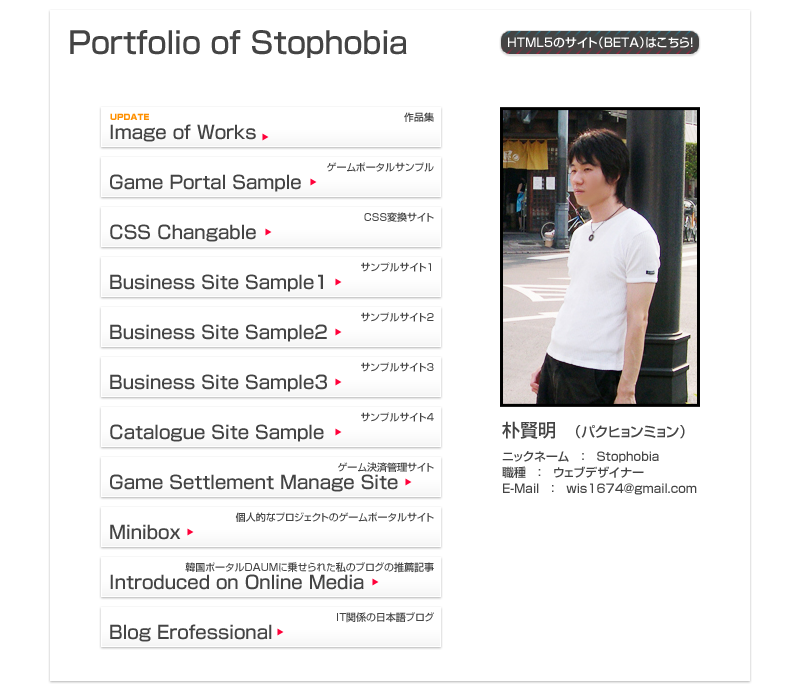
<style>
.page{position:relative;width:800px;height:700px;background:#ffffff}
.page>*{position:absolute;margin:0}
.t1{font:30px "ShinGoPro-Medium";color:#444444}
.t2{font:12px "ShinGoPro-Medium";color:#ffffff}
.t3{font:8px "ShinGoPro-Ultra";color:#ff9000}
.t4{font:10px "ShinGoPro-Medium";color:#444444}
.t5{font:18px "ShinGoPro-Medium";color:#444444}
.t6{font:12px/16px "ShinGoPro-Medium";color:#444444}
.t7{font:14px "ShinGoPro-Medium";color:#444444}
.t8{font:12px/24px "ShinGoPro-Medium";color:#444444}
</style>
<div class="page">
<p class="t1" style="left:70px;top:30px;width:337px;height:28px">Portfolio of Stophobia</p>
<p class="t2" style="left:508px;top:36px;width:185px;height:13px">HTML5のサイト（BETA）はこちら！</p>
<p class="t3" style="left:110px;top:113px;width:39px;height:7px">UPDATE</p>
<p class="t4" style="left:404px;top:112px;width:30px;height:10px">作品集</p>
<p class="t5" style="left:110px;top:124px;width:146px;height:18px">Image of Works</p>
<p class="t5" style="left:110px;top:174px;width:191px;height:18px">Game Portal Sample</p>
<p class="t4" style="left:327px;top:162px;width:107px;height:10px">ゲームポータルサンプル</p>
<p class="t4" style="left:364px;top:212px;width:70px;height:10px">CSS変換サイト</p>
<p class="t5" style="left:110px;top:224px;width:146px;height:18px">CSS Changable</p>
<p class="t4" style="left:361px;top:262px;width:70px;height:10px">サンプルサイト１</p>
<p class="t5" style="left:110px;top:274px;width:213px;height:18px">Business Site Sample1</p>
<p class="t4" style="left:361px;top:312px;width:73px;height:10px">サンプルサイト2</p>
<p class="t5" style="left:110px;top:324px;width:217px;height:18px">Business Site Sample2</p>
<p class="t4" style="left:361px;top:362px;width:73px;height:10px">サンプルサイト3</p>
<p class="t5" style="left:110px;top:374px;width:217px;height:18px">Business Site Sample3</p>
<p class="t4" style="left:361px;top:412px;width:73px;height:10px">サンプルサイト4</p>
<p class="t5" style="left:110px;top:424px;width:214px;height:18px">Catalogue Site Sample</p>
<p class="t6" style="left:502px;top:421px;width:195px;height:74px"><span class="t5">朴賢明　</span><span class="t7">（パクヒョンミョン）<br></span><span class="t8">ニックネーム　：　Stophobia<br></span>職種　：　ウェブデザイナー<br>E-Mail　：　wis1674@gmail.com</p>
<p class="t4" style="left:338px;top:462px;width:96px;height:10px">ゲーム決済管理サイト</p>
<p class="t5" style="left:110px;top:474px;width:288px;height:18px">Game Settlement Manage Site</p>
<p class="t4" style="left:235px;top:512px;width:199px;height:10px">個人的なプロジェクトのゲームポータルサイト</p>
<p class="t5" style="left:110px;top:524px;width:71px;height:16px">Minibox</p>
<p class="t4" style="left:185px;top:562px;width:249px;height:11px">韓国ポータルDAUMに乗せられた私のブログの推薦記事</p>
<p class="t5" style="left:110px;top:574px;width:254px;height:16px">Introduced on Online Media</p>
<p class="t4" style="left:337px;top:612px;width:97px;height:11px">IT関係の日本語ブログ</p>
<p class="t5" style="left:110px;top:624px;width:162px;height:18px">Blog Erofessional</p>
</div>
